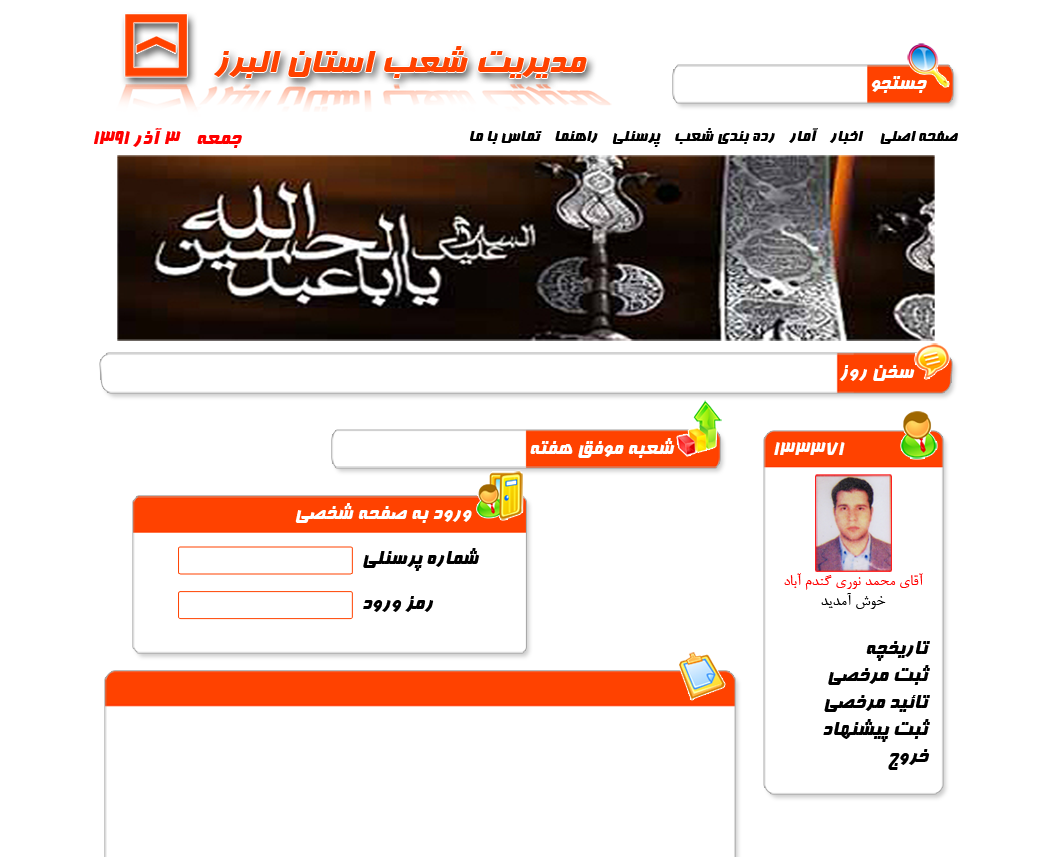
<style>
.page{position:relative;width:1059px;height:857px;background:#ffffff}
.page>*{position:absolute;margin:0}
.t1{font:36.2px "BFarnaz";color:#ff4200;scale:1.09 1}
.t2{font:22.5px "BFarnaz";color:#ffffff}
.t3{font:22.5px "BFarnaz";color:#ff0000}
.t4{font:18px "BFarnaz";color:#000000}
.t5{font:22.5px "BFarnaz";color:#000000}
.t6{font:16.9px "BNazanin";color:#ff0000}
.t7{font:17.3px "BNazanin";color:#000000}
</style>
<div class="page">
<p class="t1" style="left:214px;top:46px;width:373px;height:32px">مديريت شعب استان البرز</p>
<p class="t2" style="left:871px;top:76px;width:56px;height:17px">جستجو</p>
<p class="t3" style="left:94px;top:128px;width:148px;height:20px">جمعه    3 آذر 1391</p>
<p class="t4" style="left:470px;top:128px;width:488px;height:19px">صفحه اصلي     اخبار    آمار    رده بندي شعب    پرسنلي    راهنما    تماس با ما</p>
<p class="t2" style="left:839px;top:365px;width:76px;height:16px">سخن روز</p>
<p class="t2" style="left:530px;top:438px;width:145px;height:20px">شعبه موفق هفته</p>
<p class="t2" style="left:774px;top:442px;width:71px;height:13px">133371</p>
<p class="t2" style="left:295px;top:503px;width:177px;height:20px">ورود به صفحه شخصي</p>
<p class="t5" style="left:363px;top:548px;width:117px;height:23px">شماره پرسنلي</p>
<p class="t6" style="left:784px;top:573px;width:139px;height:17px">آقاي محمد نوري گندم آباد</p>
<p class="t7" style="left:821px;top:593px;width:65px;height:16px">خوش آمديد</p>
<p class="t5" style="left:363px;top:596px;width:71px;height:16px">رمز ورود</p>
<p class="t5" style="left:823px;top:641px;width:107px;height:129px">تاريخچه<br>ثبت مرخصي<br>تائيد مرخصي<br>ثبت پيشنهاد<br>خروج</p>
</div>
